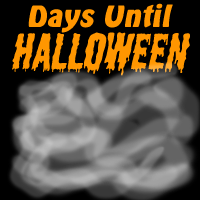
<style>
.page{position:relative;width:200px;height:200px;background:#000000}
.page>*{position:absolute;margin:0}
.t1{font:30px/41px "Emmett";color:#ff9600;font-style:italic}
.t2{font:48px/41px "Shlop";color:#ff9600;font-style:italic}
</style>
<div class="page">
<p class="t1" style="left:12px;top:3px;width:178px;height:73px;text-align:center">Days Until<br><span class="t2">Halloween</span></p>
</div>
